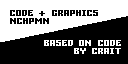
<style>
.page{position:relative;width:128px;height:64px;background:#000000}
.page>*{position:absolute;margin:0}
.t1{font:15.4px "Gamer";letter-spacing:0.02em;color:#000000}
.t2{font:15.4px "Gamer";letter-spacing:0.02em;color:#ffffff}
.t3{font:15.4px "Gamer";color:#ffffff}
</style>
<div class="page">
<p class="t1" style="left:10px;top:10px;width:88px;height:14px">CODE + GRAPHICS<br>NCHPMN</p>
<p class="t2" style="left:44px;top:40px;width:77px;height:14px;text-align:right">BASED ON CO<span class="t3">DE<br></span>BY <span class="t3">CRAIT</span></p>
</div>
